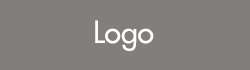
<style>
.page{position:relative;width:250px;height:70px;background:#817f7b}
.page>*{position:absolute;margin:0}
.t1{font:29.7px "FuturaLT";color:#ffffff}
</style>
<div class="page">
<p class="t1" style="left:95px;top:20px;width:59px;height:31px">Logo</p>
</div>
